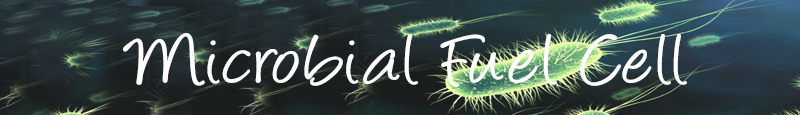
<style>
.page{position:relative;width:800px;height:115px}
.page>*{position:absolute;margin:0}
.t1{font:82px "Angelina";color:#fefefe;scale:1.15 1}
</style>
<div class="page">
<p class="t1" style="left:123px;top:33px;width:564px;height:54px">Microbial Fuel Cell</p>
</div>
